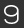
<style>
.page{position:relative;width:24px;height:28px;background:#333333}
.page>*{position:absolute;margin:0}
.t1{font:27.3px "NexaLight";color:#ffffff;scale:0.97 1}
</style>
<div class="page">
<p class="t1" style="left:4px;top:5px;width:15px;height:19px">9</p>
</div>
